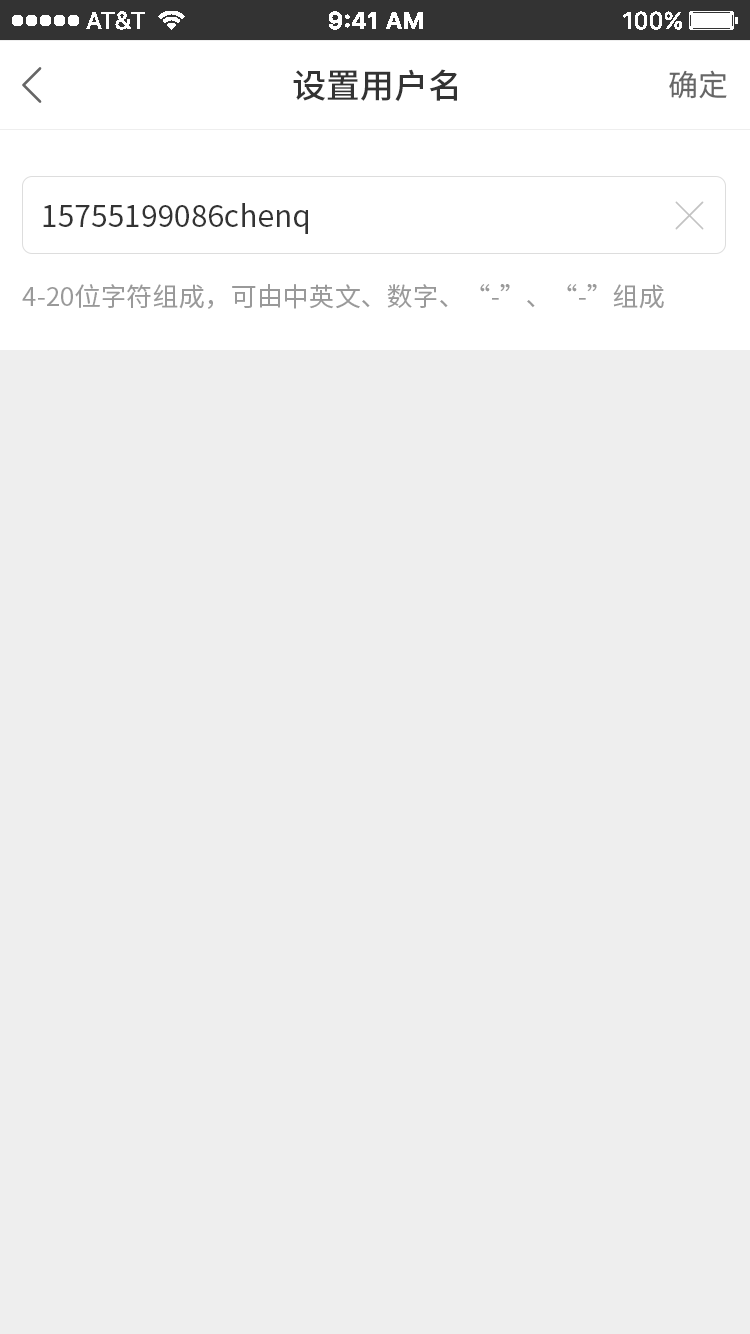
<style>
.page{position:relative;width:750px;height:1334px;background:#eeeeee}
.page>*{position:absolute;margin:0}
.t1{font:34px "SourceHanSansCN-Medium";color:#333333}
.t2{font:30px "SourceHanSansCN-Regular";color:#666666}
.t3{font:30px "SourceHanSansCN-Regular";color:#333333}
.t4{font:26px "SourceHanSansCN-Regular";color:#999999}
</style>
<div class="page">
<p class="t1" style="left:293px;top:69px;width:164px;height:33px">设置用户名</p>
<p class="t2" style="left:669px;top:70px;width:58px;height:29px">确定</p>
<p class="t3" style="left:43px;top:203px;width:265px;height:31px">15755199086chenq</p>
<p class="t4" style="left:22px;top:284px;width:642px;height:25px">4-20位字符组成，可由中英文、数字、“-”、“-”组成</p>
</div>
